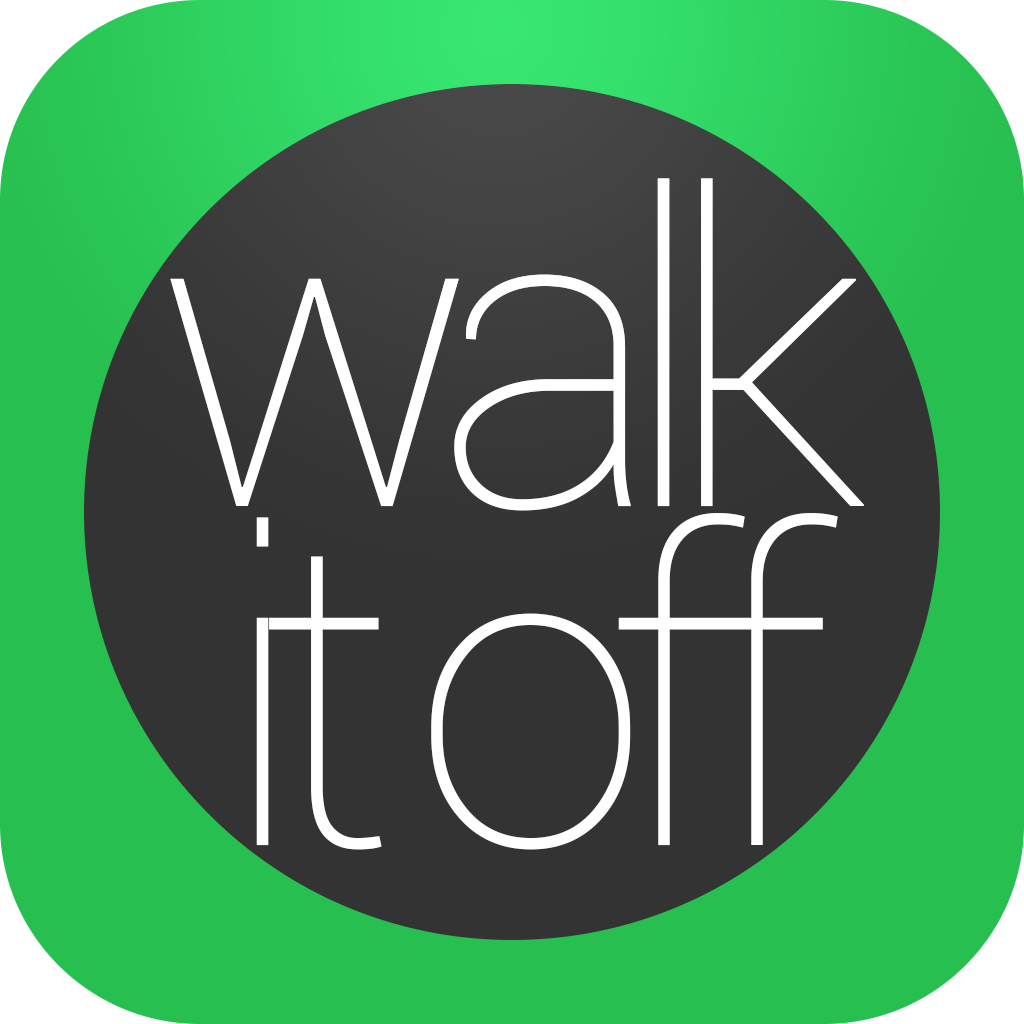
<style>
.page{position:relative;width:1024px;height:1024px;background:#333333}
.page>*{position:absolute;margin:0}
.t1{font:430px "Roboto-Thin";letter-spacing:-0.1em;color:#ffffff}
</style>
<div class="page">
<p class="t1" style="left:170px;top:178px;width:695px;height:333px">walk</p>
<p class="t1" style="left:256px;top:513px;width:582px;height:337px">it off</p>
</div>
